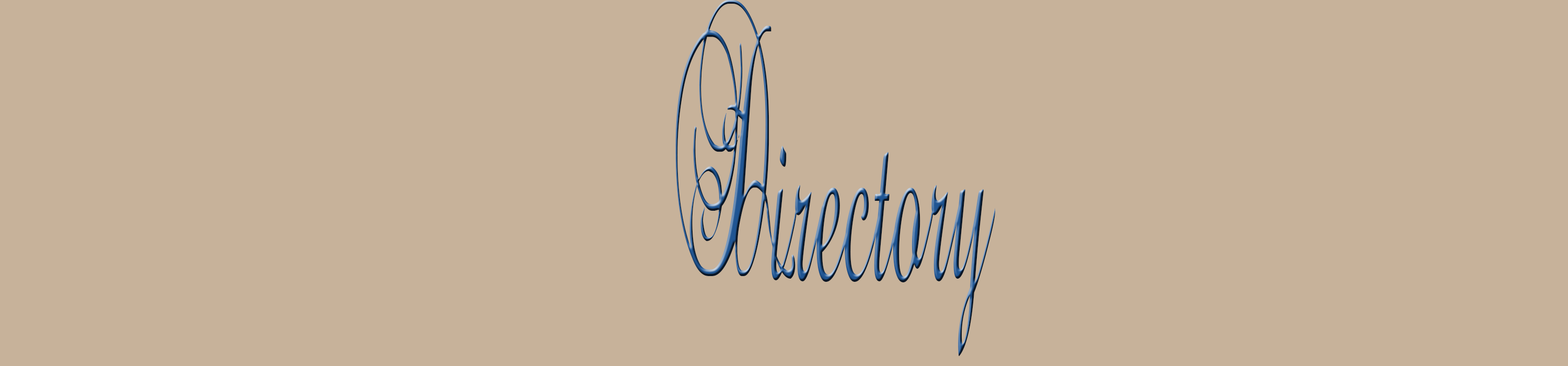
<style>
.page{position:relative;width:1568px;height:366px;background:#c7b29a}
.page>*{position:absolute;margin:0}
.t1{font:263.3px "Precious";scale:0.3 1}
</style>
<div class="page">
<p class="t1" style="left:675px;top:0px;width:320px;height:356px">Directory</p>
</div>
